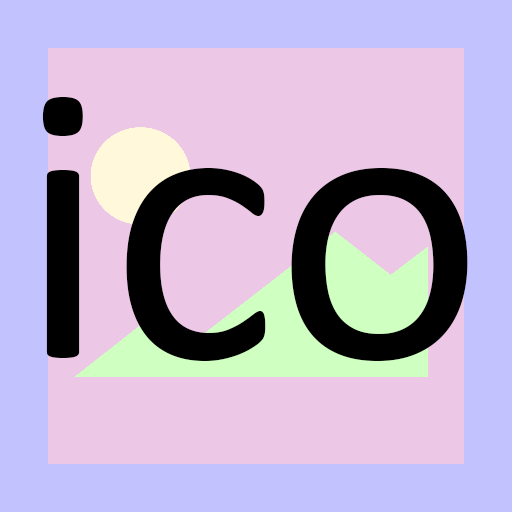
<style>
.page{position:relative;width:512px;height:512px;background:#ecc8e6}
.page>*{position:absolute;margin:0}
.t1{font:400px "Calibri";color:#000000}
</style>
<div class="page">
<p class="t1" style="left:42px;top:97px;width:426px;height:264px">ico</p>
</div>
